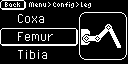
<style>
.page{position:relative;width:128px;height:64px;background:#000000}
.page>*{position:absolute;margin:0}
.t1{font:8px "6pxNormal";color:#ffffff}
.t2{font:16px "PixelOperator";color:#ffffff}
</style>
<div class="page">
<p class="t1" style="left:5px;top:2px;width:15px;height:5px">Back</p>
<p class="t1" style="left:29px;top:2px;width:17px;height:5px">Menu</p>
<p class="t1" style="left:48px;top:2px;width:3px;height:5px">&gt;</p>
<p class="t1" style="left:53px;top:2px;width:21px;height:6px">Config</p>
<p class="t1" style="left:76px;top:2px;width:3px;height:5px">&gt;</p>
<p class="t1" style="left:81px;top:2px;width:10px;height:6px">Leg</p>
<p class="t2" style="left:18px;top:14px;width:26px;height:9px">Coxa</p>
<p class="t2" style="left:18px;top:32px;width:35px;height:9px">Femur</p>
<p class="t2" style="left:18px;top:50px;width:29px;height:9px">Tibia</p>
</div>
